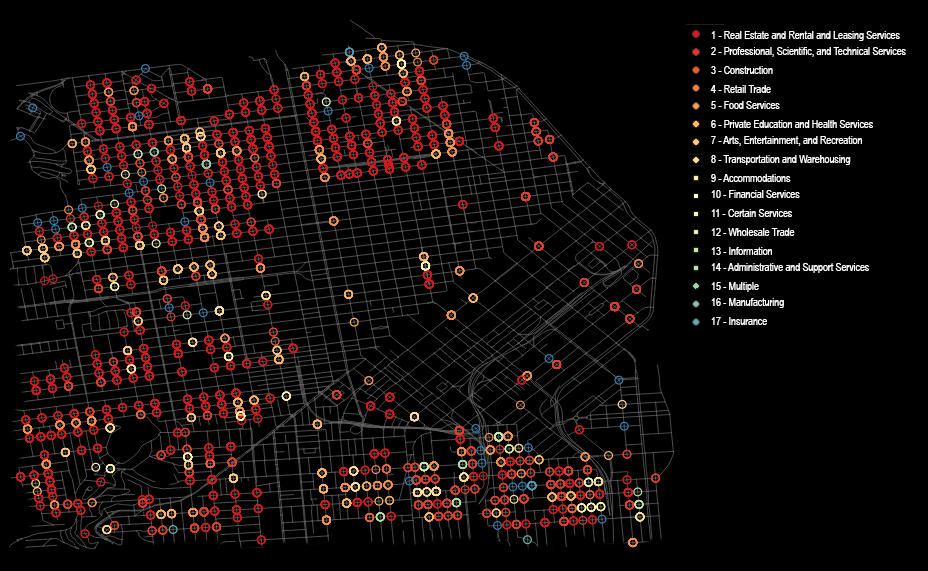
<style>
.page{position:relative;width:928px;height:571px;background:#000000}
.page>*{position:absolute;margin:0}
.t1{font:10.7px "ArialNarrow";color:#ffffff}
</style>
<div class="page">
<p class="t1" style="left:711px;top:31px;width:189px;height:10px">1 - Real Estate and Rental and Leasing Services</p>
<p class="t1" style="left:711px;top:47px;width:195px;height:10px">2 - Professional, Scientific, and Technical Services</p>
<p class="t1" style="left:711px;top:66px;width:62px;height:8px">3 - Construction</p>
<p class="t1" style="left:710px;top:85px;width:61px;height:8px">4 - Retail Trade</p>
<p class="t1" style="left:711px;top:101px;width:69px;height:8px">5 - Food Services</p>
<p class="t1" style="left:711px;top:120px;width:162px;height:8px">6 - Private Education and Health Services</p>
<p class="t1" style="left:711px;top:136px;width:151px;height:10px">7 - Arts, Entertainment, and Recreation</p>
<p class="t1" style="left:711px;top:155px;width:140px;height:10px">8 - Transportation and Warehousing</p>
<p class="t1" style="left:711px;top:174px;width:80px;height:8px">9 - Accommodations</p>
<p class="t1" style="left:711px;top:190px;width:89px;height:8px">10 - Financial Services</p>
<p class="t1" style="left:711px;top:209px;width:81px;height:8px">11 - Certain Services</p>
<p class="t1" style="left:711px;top:228px;width:84px;height:8px">12 - Wholesale Trade</p>
<p class="t1" style="left:711px;top:247px;width:61px;height:8px">13 - Information</p>
<p class="t1" style="left:711px;top:263px;width:158px;height:10px">14 - Administrative and Support Services</p>
<p class="t1" style="left:711px;top:282px;width:48px;height:10px">15 - Multiple</p>
<p class="t1" style="left:711px;top:298px;width:73px;height:10px">16 - Manufacturing</p>
<p class="t1" style="left:711px;top:317px;width:56px;height:8px">17 - Insurance</p>
</div>
